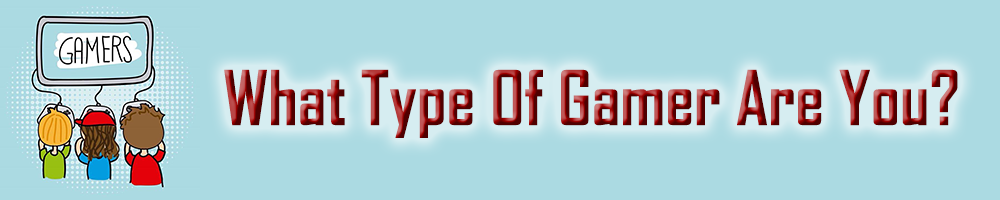
<style>
.page{position:relative;width:1000px;height:200px;background:#abdae2}
.page>*{position:absolute;margin:0}
.t1{font:72px "AgencyFB-Bold"}
</style>
<div class="page">
<p class="t1" style="left:224px;top:69px;width:734px;height:69px">What Type Of Gamer Are You?</p>
</div>
